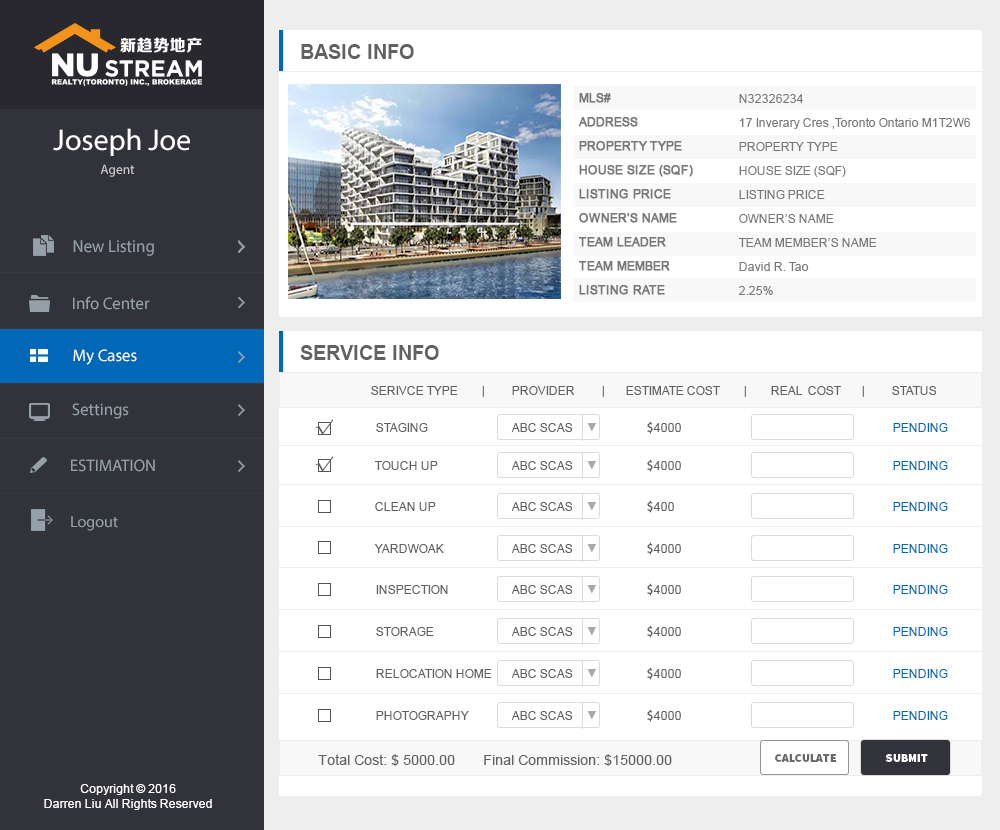
<style>
.page{position:relative;width:1000px;height:830px;background:#ffffff}
.page>*{position:absolute;margin:0}
.t1{font:20px "Arial-BoldMT";color:#616161}
.t2{font:12px/24px "ArialMT";color:#787878;font-weight:bold}
.t3{font:12px/24px "ArialMT";color:#787878}
.t4{font:30px "MyriadPro-Regular";color:#ffffff}
.t5{font:13.4px "MyriadPro-Regular";color:#cccccc}
.t6{font:17.6px "MyriadPro-Regular";color:#95a0aa;scale:0.96 1}
.t7{font:16.8px "MyriadPro-Regular";color:#95a0aa}
.t8{font:16.8px "MyriadPro-Regular";color:#ffffff}
.t9{font:12px "ArialMT";color:#616161}
.t10{font:18px "MyriadPro-Regular";color:#616161}
.t11{font:10px "AdobeHeitiStd-Regular";color:#a9a9a9}
.t12{font:12px "AdobeHeitiStd-Regular";color:#616161}
.t13{font:12px "ArialMT";color:#0068b7;text-transform:uppercase}
.t14{font:16px "MyriadPro-Regular";color:#95a0aa}
.t15{font:14px "ArialMT";color:#616161}
.t16{font:12px "SourceSansPro-Black";color:#686868}
.t17{font:12px "SourceSansPro-Black";color:#ffffff}
.t18{font:12px "ArialMT";color:#ffffff}
</style>
<div class="page">
<p class="t1" style="left:301px;top:44px;width:113px;height:15px">BASIC INFO</p>
<p class="t2" style="left:578px;top:93px;width:115px;height:202px">MLS# <br>ADDRESS<br>PROPERTY TYPE<br>HOUSE SIZE (SQF)<br>LISTING PRICE<br>OWNER’S NAME<br>TEAM LEADER<br>TEAM MEMBER<br>LISTING RATE</p>
<p class="t3" style="left:738px;top:94px;width:232px;height:201px">N32326234<br>17 Inverary Cres ,Toronto Ontario M1T2W6<br>PROPERTY TYPE<br>HOUSE SIZE (SQF)<br>LISTING PRICE<br>OWNER’S NAME<br>TEAM MEMBER’S NAME<br>David R. Tao<br>2.25%</p>
<p class="t4" style="left:53px;top:128px;width:137px;height:28px">Joseph Joe</p>
<p class="t5" style="left:100px;top:164px;width:35px;height:13px">Agent</p>
<p class="t6" style="left:73px;top:240px;width:81px;height:16px">New Listing</p>
<p class="t7" style="left:73px;top:296px;width:77px;height:14px">Info Center</p>
<p class="t8" style="left:73px;top:349px;width:64px;height:16px">My Cases</p>
<p class="t1" style="left:300px;top:345px;width:139px;height:15px">SERVICE INFO</p>
<p class="t9" style="left:371px;top:386px;width:566px;height:11px">SERIVCE TYPE        |         PROVIDER         |       ESTIMATE COST        |        REAL  COST       |         STATUS</p>
<p class="t7" style="left:72px;top:403px;width:57px;height:16px">Settings</p>
<p class="t10" style="left:316px;top:419px;width:17px;height:16px">√</p>
<p class="t9" style="left:376px;top:423px;width:52px;height:9px">STAGING</p>
<p class="t9" style="left:511px;top:423px;width:62px;height:9px">ABC SCAS</p>
<p class="t11" style="left:587px;top:423px;width:9px;height:9px">▼</p>
<p class="t9" style="left:647px;top:421px;width:34px;height:13px"><span class="t12">$</span>4000</p>
<p class="t13" style="left:893px;top:423px;width:55px;height:9px">Pending</p>
<p class="t7" style="left:71px;top:459px;width:84px;height:13px">ESTIMATION</p>
<p class="t10" style="left:316px;top:456px;width:17px;height:16px">√</p>
<p class="t9" style="left:374px;top:461px;width:64px;height:9px">TOUCH UP</p>
<p class="t9" style="left:511px;top:461px;width:62px;height:9px">ABC SCAS</p>
<p class="t11" style="left:587px;top:461px;width:9px;height:9px">▼</p>
<p class="t9" style="left:647px;top:459px;width:34px;height:13px"><span class="t12">$</span>4000</p>
<p class="t13" style="left:893px;top:461px;width:55px;height:9px">Pending</p>
<p class="t9" style="left:375px;top:502px;width:61px;height:9px">CLEAN UP</p>
<p class="t9" style="left:511px;top:502px;width:62px;height:9px">ABC SCAS</p>
<p class="t11" style="left:587px;top:502px;width:9px;height:9px">▼</p>
<p class="t9" style="left:647px;top:500px;width:27px;height:13px"><span class="t12">$</span>400</p>
<p class="t13" style="left:893px;top:502px;width:55px;height:9px">Pending</p>
<p class="t14" style="left:71px;top:516px;width:47px;height:15px">Logout</p>
<p class="t9" style="left:374px;top:544px;width:70px;height:9px">YARDWOAK</p>
<p class="t9" style="left:511px;top:544px;width:62px;height:9px">ABC SCAS</p>
<p class="t11" style="left:587px;top:544px;width:9px;height:9px">▼</p>
<p class="t9" style="left:647px;top:542px;width:34px;height:13px"><span class="t12">$</span>4000</p>
<p class="t13" style="left:893px;top:544px;width:55px;height:9px">Pending</p>
<p class="t9" style="left:376px;top:585px;width:72px;height:9px">INSPECTION</p>
<p class="t9" style="left:511px;top:585px;width:62px;height:9px">ABC SCAS</p>
<p class="t11" style="left:587px;top:585px;width:9px;height:9px">▼</p>
<p class="t9" style="left:647px;top:583px;width:34px;height:13px"><span class="t12">$</span>4000</p>
<p class="t13" style="left:893px;top:585px;width:55px;height:9px">Pending</p>
<p class="t9" style="left:376px;top:627px;width:58px;height:9px">STORAGE</p>
<p class="t9" style="left:511px;top:627px;width:62px;height:9px">ABC SCAS</p>
<p class="t11" style="left:587px;top:627px;width:9px;height:9px">▼</p>
<p class="t9" style="left:647px;top:625px;width:34px;height:13px"><span class="t12">$</span>4000</p>
<p class="t13" style="left:893px;top:627px;width:55px;height:9px">Pending</p>
<p class="t9" style="left:376px;top:669px;width:116px;height:9px">RELOCATION HOME</p>
<p class="t9" style="left:511px;top:669px;width:62px;height:9px">ABC SCAS</p>
<p class="t11" style="left:587px;top:669px;width:9px;height:9px">▼</p>
<p class="t9" style="left:647px;top:667px;width:34px;height:13px"><span class="t12">$</span>4000</p>
<p class="t13" style="left:893px;top:669px;width:55px;height:9px">Pending</p>
<p class="t9" style="left:376px;top:711px;width:93px;height:9px">PHOTOGRAPHY</p>
<p class="t9" style="left:511px;top:711px;width:62px;height:9px">ABC SCAS</p>
<p class="t11" style="left:587px;top:711px;width:9px;height:9px">▼</p>
<p class="t9" style="left:647px;top:709px;width:34px;height:13px"><span class="t12">$</span>4000</p>
<p class="t13" style="left:893px;top:711px;width:55px;height:9px">Pending</p>
<p class="t15" style="left:318px;top:754px;width:354px;height:12px">Total Cost: $ 5000.00       Final Commission: $15000.00</p>
<p class="t16" style="left:775px;top:754px;width:62px;height:8px">CALCULATE</p>
<p class="t17" style="left:885px;top:754px;width:43px;height:8px">SUBMIT</p>
<p class="t18" style="left:44px;top:784px;width:168px;height:26px;text-align:center">Copyright © 2016<br>Darren Liu All Rights Reserved</p>
</div>
